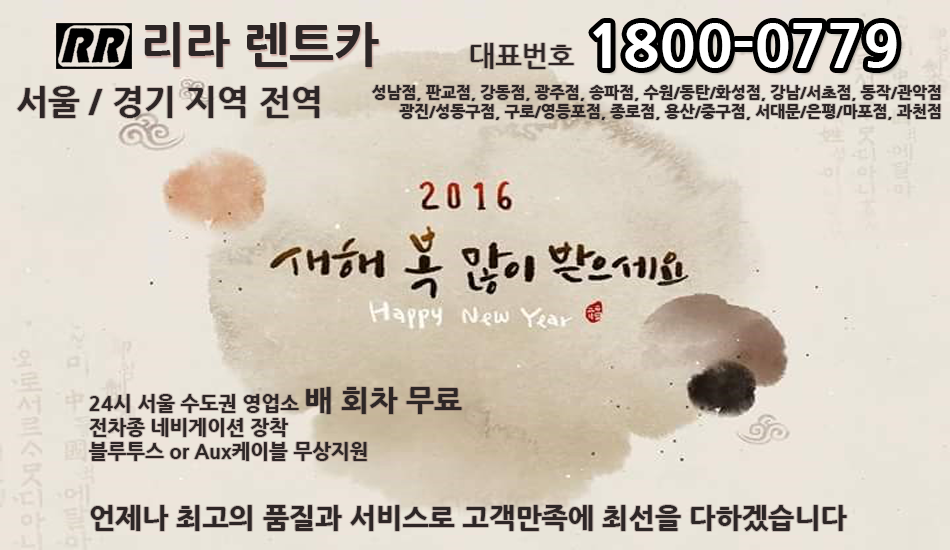
<style>
.page{position:relative;width:950px;height:550px}
.page>*{position:absolute;margin:0}
.t1{font:48px "NanumGothicExtraBold";color:#2d2626}
.t2{font:60px "NanumGothicExtraBold";color:#ffffff}
.t3{font:28px "NanumGothicBold";color:#2d2626}
.t4{font:34px "NanumGothicExtraBold";color:#2d2626}
.t5{font:16px "NanumGothicExtraBold";color:#2d2626}
.t6{font:20px "NanumGothicExtraBold";color:#2d2626}
.t7{font:30px "NanumGothicExtraBold";color:#2d2626}
.t8{font:28px "NanumGothicExtraBold";color:#2d2626}
</style>
<div class="page">
<p class="t1" style="left:144px;top:22px;width:235px;height:45px">리라 렌트카</p>
<p class="t2" style="left:593px;top:23px;width:304px;height:45px">1800-0779</p>
<p class="t3" style="left:470px;top:43px;width:104px;height:26px">대표번호</p>
<p class="t4" style="left:17px;top:86px;width:303px;height:32px">서울 / 경기 지역 전역</p>
<p class="t5" style="left:372px;top:85px;width:569px;height:35px;text-align:right">성남점, 판교점, 강동점, 광주점, 송파점, 수원/동탄/화성점, 강남/서초점, 동작/관악점<br>광진/성동구점, 구로/영등포점, 종로점, 용산/중구점, 서대문/은평/마포점, 과천점</p>
<p class="t6" style="left:89px;top:387px;width:373px;height:74px">24시 서울 수도권 영업소 <span class="t7">배 회차 무료</span> <br>전차종 네비게이션 장착 <br>블루투스 or Aux케이블 무상지원</p>
<p class="t8" style="left:90px;top:505px;width:757px;height:26px">언제나 최고의 품질과 서비스로 고객만족에 최선을 다하겠습니다</p>
</div>
